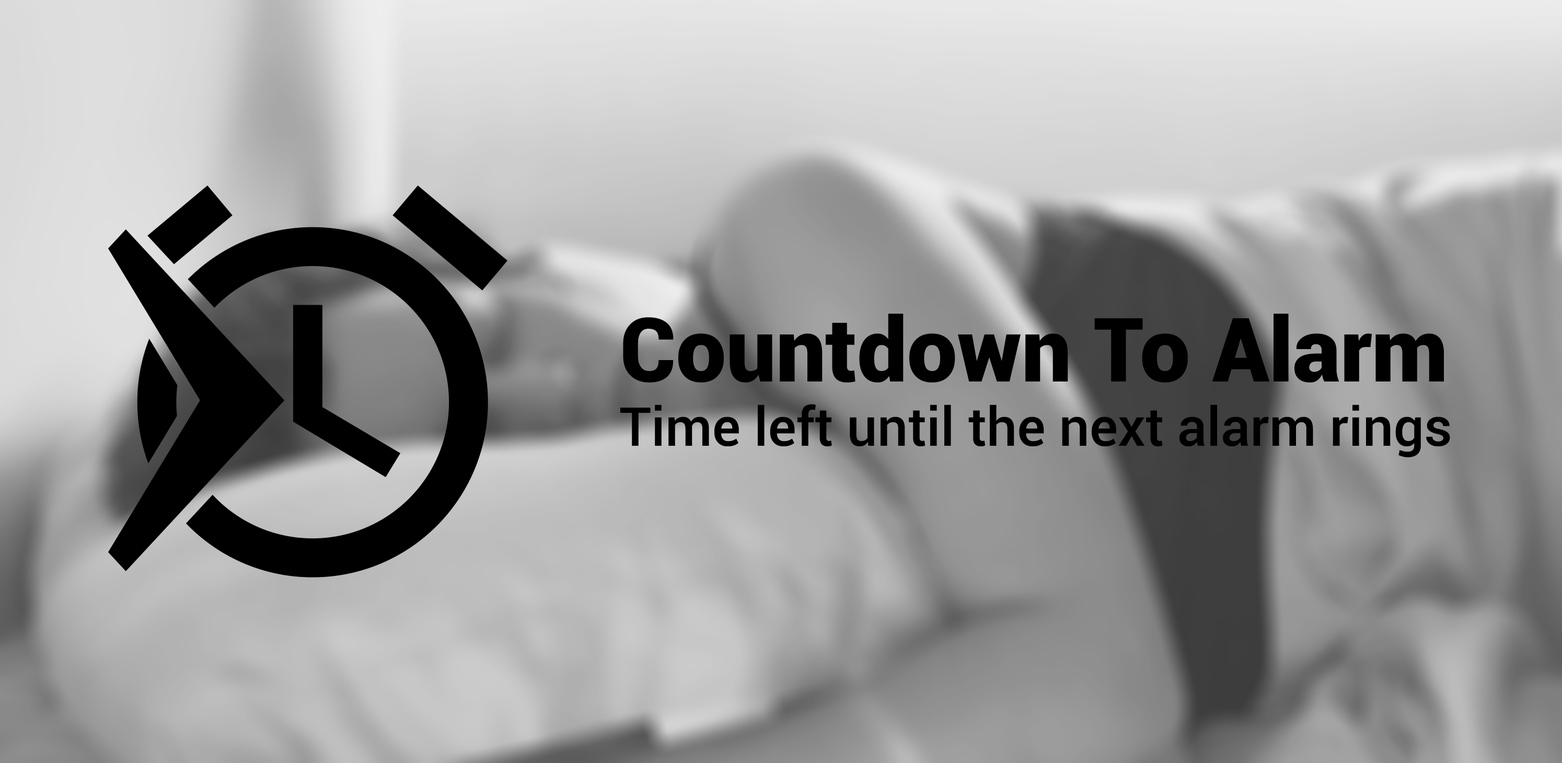
<style>
.page{position:relative;width:1562px;height:763px}
.page>*{position:absolute;margin:0}
.t1{font:53.6px "Roboto-Medium";color:#000000}
.t2{font:88.9px "Roboto-Black";color:#000000}
</style>
<div class="page">
<p class="t1" style="left:620px;top:314px;width:831px;height:143px"><span class="t2">Countdown To Alarm<br></span>Time left until the next alarm rings</p>
</div>
